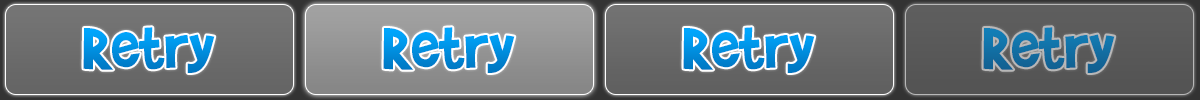
<style>
.page{position:relative;width:1200px;height:100px}
.page>*{position:absolute;margin:0}
.t1{font:66px "BradyBunchRemastered";color:#0091e3}
.t2{font:66px "BradyBunchRemastered";color:#1270a6}
</style>
<div class="page">
<p class="t1" style="left:83px;top:27px;width:132px;height:46px">Retry</p>
<p class="t1" style="left:383px;top:27px;width:132px;height:46px">Retry</p>
<p class="t1" style="left:683px;top:27px;width:132px;height:46px">Retry</p>
<p class="t2" style="left:983px;top:27px;width:132px;height:46px">Retry</p>
</div>
